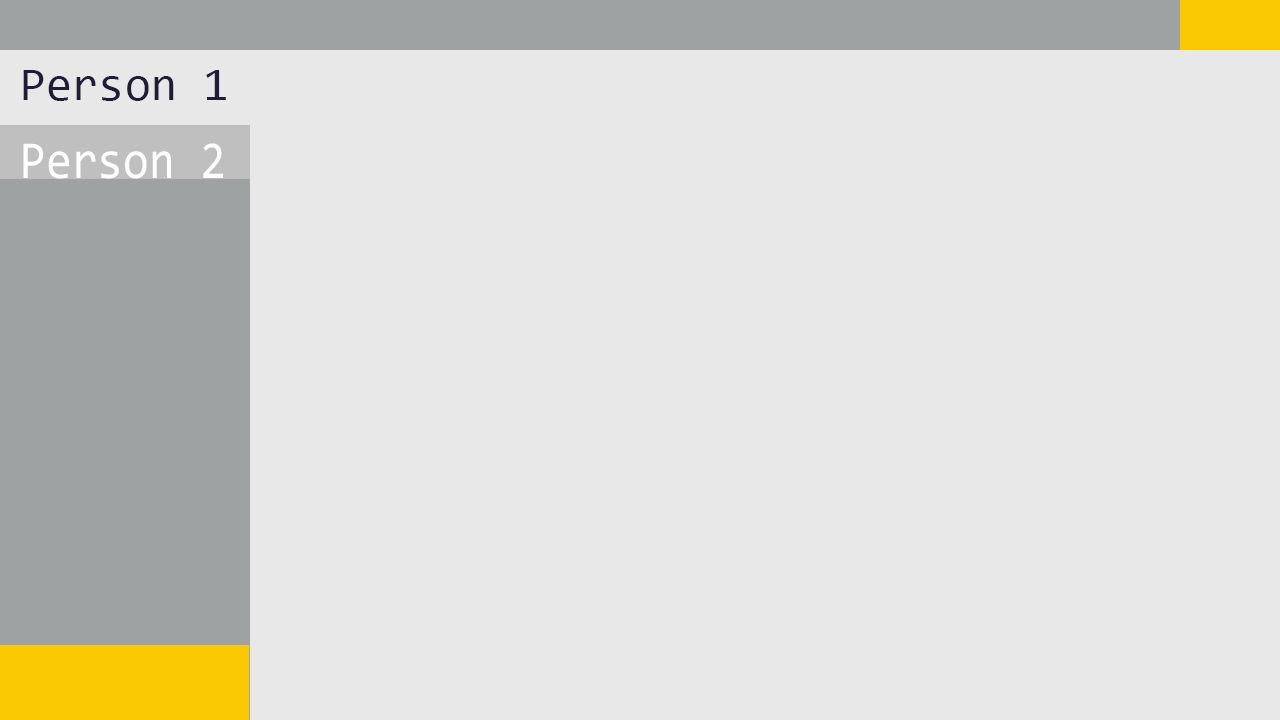
<style>
.page{position:relative;width:1280px;height:720px;background:#e8e8e8}
.page>*{position:absolute;margin:0}
.t1{font:47.3px "Consolas";color:#1f1d36}
.t2{font:53.4px "Consolas";color:#ffffff;scale:0.87 1}
</style>
<div class="page">
<p class="t1" style="left:23px;top:70px;width:203px;height:31px">Person 1</p>
<p class="t2" style="left:23px;top:143px;width:200px;height:36px">Person 2</p>
</div>
